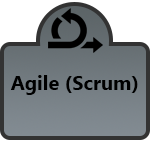
<style>
.page{position:relative;width:150px;height:150px;background:#ffffff}
.page>*{position:absolute;margin:0}
.t1{font:20px "Gadugi-Bold";color:#000000}
</style>
<div class="page">
<p class="t1" style="left:10px;top:75px;width:128px;height:20px">Agile (Scrum)</p>
</div>
